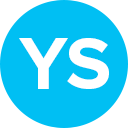
<style>
.page{position:relative;width:128px;height:128px;background:#00bff3}
.page>*{position:absolute;margin:0}
.t1{font:75px "ProximaNova-Bold";color:#ffffff;text-transform:uppercase}
</style>
<div class="page">
<p class="t1" style="left:19px;top:38px;width:90px;height:51px">YS</p>
</div>
